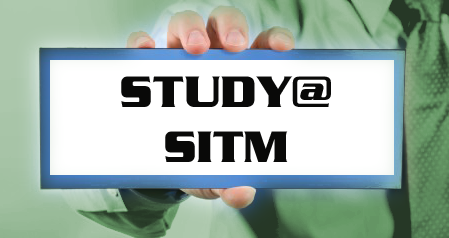
<style>
.page{position:relative;width:449px;height:238px;background:#ffffff}
.page>*{position:absolute;margin:0}
.t1{font:45.8px "SerpentineD-Bold";color:#090908}
</style>
<div class="page">
<p class="t1" style="left:121px;top:76px;width:210px;height:86px;text-align:center">STUDY@<br>SITM</p>
</div>
